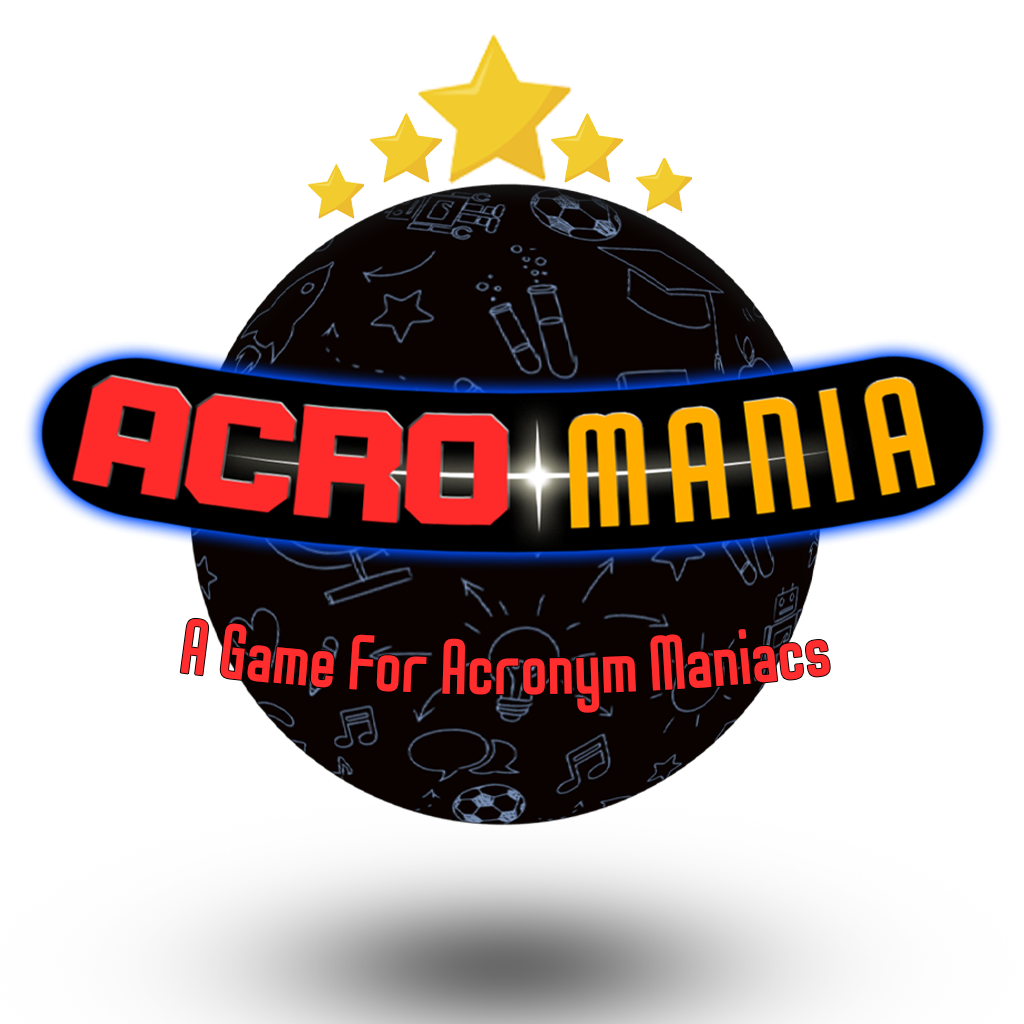
<style>
.page{position:relative;width:1024px;height:1024px;background:#ffffff}
.page>*{position:absolute;margin:0}
.t1{font:61px "D3-Smartism-TypeA";color:#ff2d2d}
</style>
<div class="page">
<p class="t1" style="left:180px;top:618px;width:650px;height:95px;rotate:-3deg">A Game For Acronym Maniacs</p>
</div>
